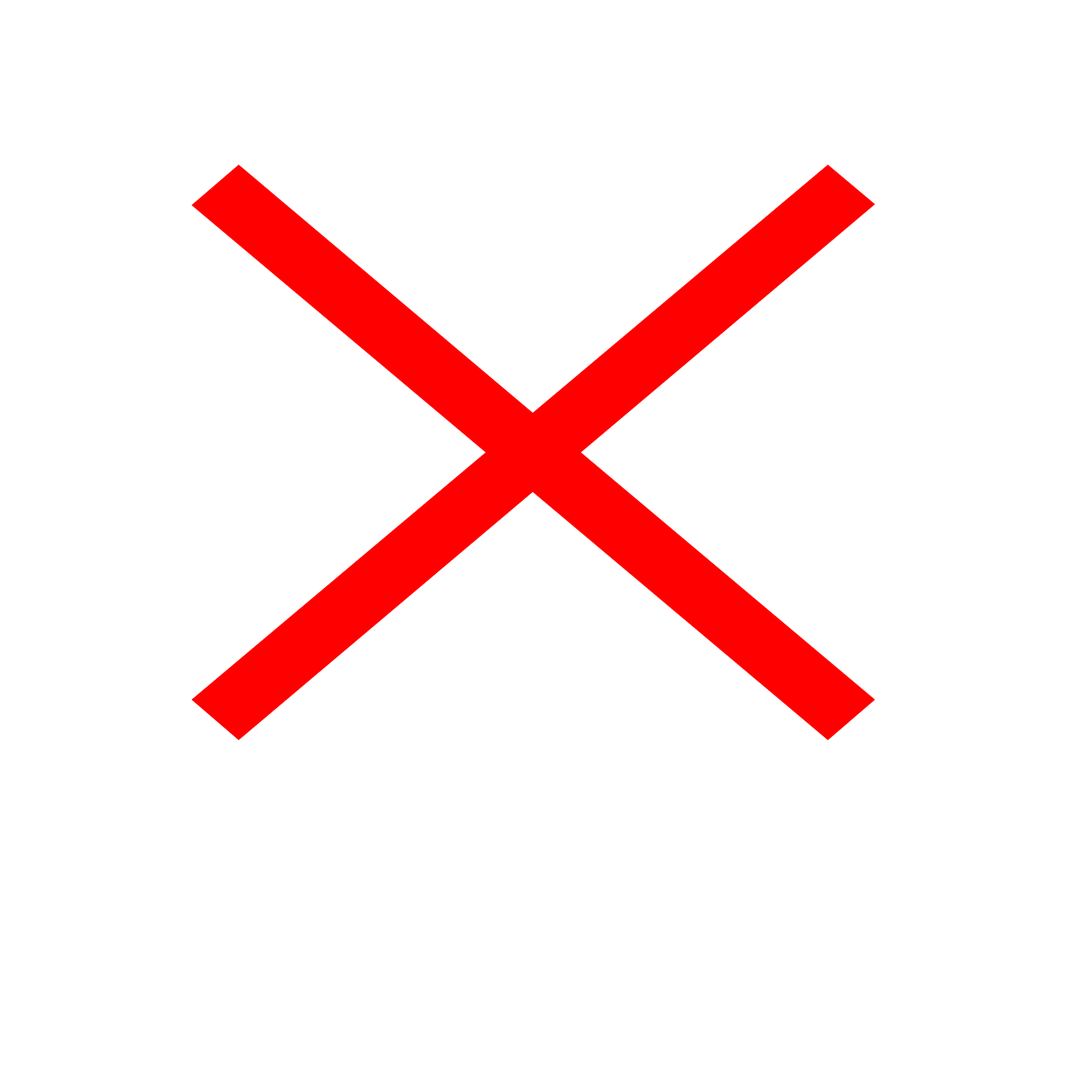
<style>
.page{position:relative;width:1092px;height:1092px;background:#ffffff}
.page>*{position:absolute;margin:0}
.t1{font:895.8px "KozGoPr6N-Regular";letter-spacing:0.025em;color:#ff0000;scale:1.19 1}
</style>
<div class="page">
<p class="t1" style="left:191px;top:165px;width:684px;height:576px">×</p>
</div>
